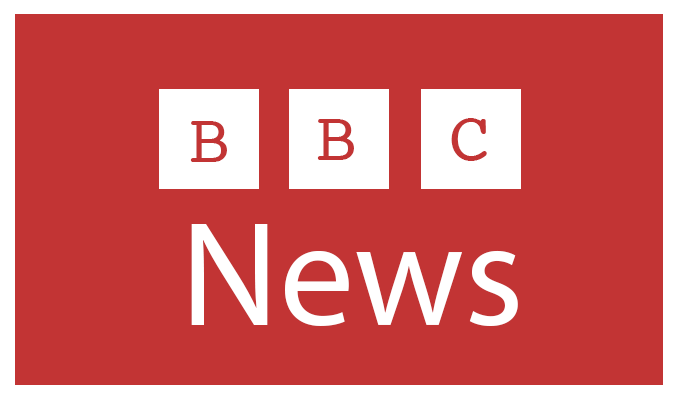
<style>
.page{position:relative;width:678px;height:401px;background:#c23434}
.page>*{position:absolute;margin:0}
.t1{font:70px "Courier";color:#c23434}
.t2{font:150px "MyriadPro-Regular";color:#ffffff}
</style>
<div class="page">
<p class="t1" style="left:190px;top:121px;width:37px;height:41px">B</p>
<p class="t1" style="left:317px;top:119px;width:37px;height:41px">B</p>
<p class="t1" style="left:451px;top:118px;width:36px;height:43px">C</p>
<p class="t2" style="left:191px;top:224px;width:327px;height:102px">News</p>
</div>
